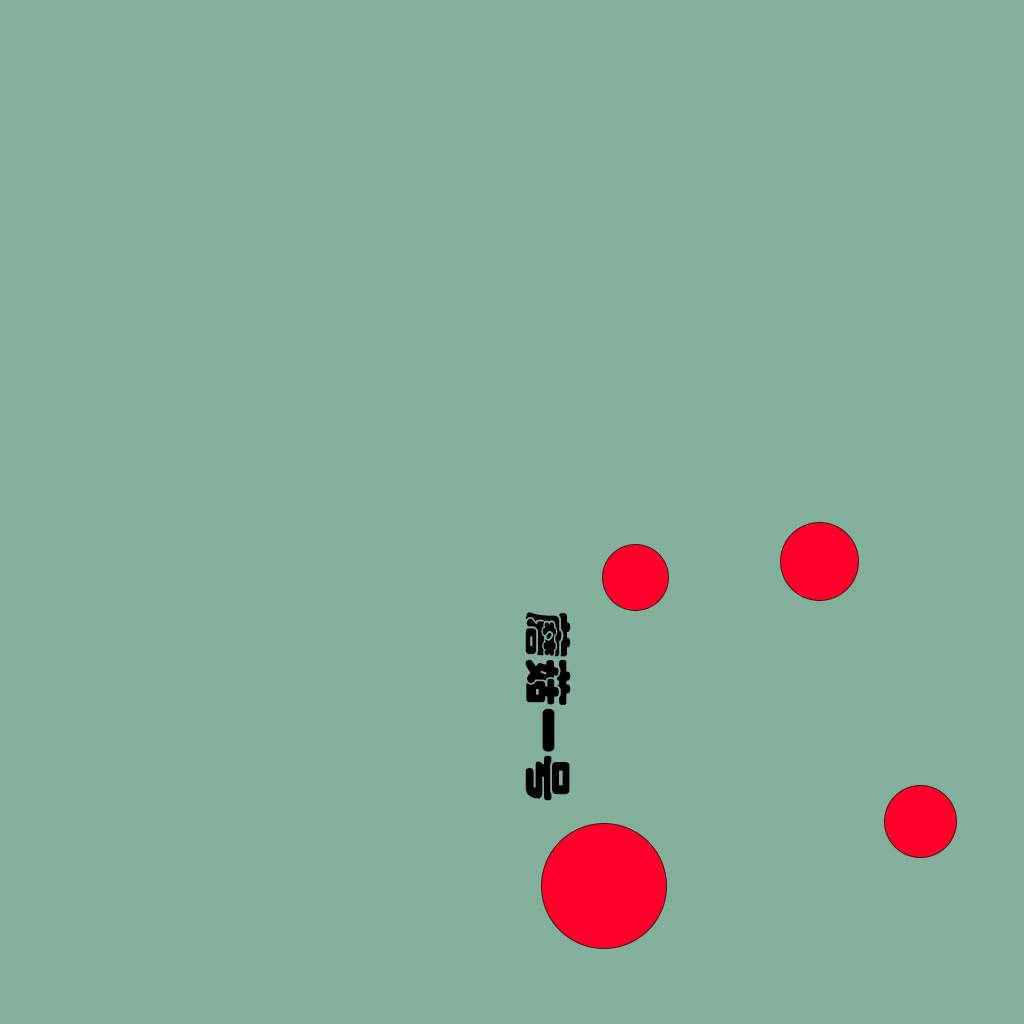
<style>
.page{position:relative;width:1024px;height:1024px;background:#83af9b}
.page>*{position:absolute;margin:0}
.t1{font:48px "STHupo";color:#000000}
</style>
<div class="page">
<p class="t1" style="left:525px;top:612px;width:46px;height:189px;rotate:90deg">蘑菇一号</p>
</div>
